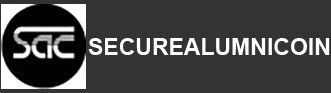
<style>
.page{position:relative;width:331px;height:93px;background:#333333}
.page>*{position:absolute;margin:0}
.t1{font:23px "Arial-BoldMT";color:#fefefe}
</style>
<div class="page">
<p class="t1" style="left:88px;top:38px;width:242px;height:17px">SECUREALUMNICOIN</p>
</div>
